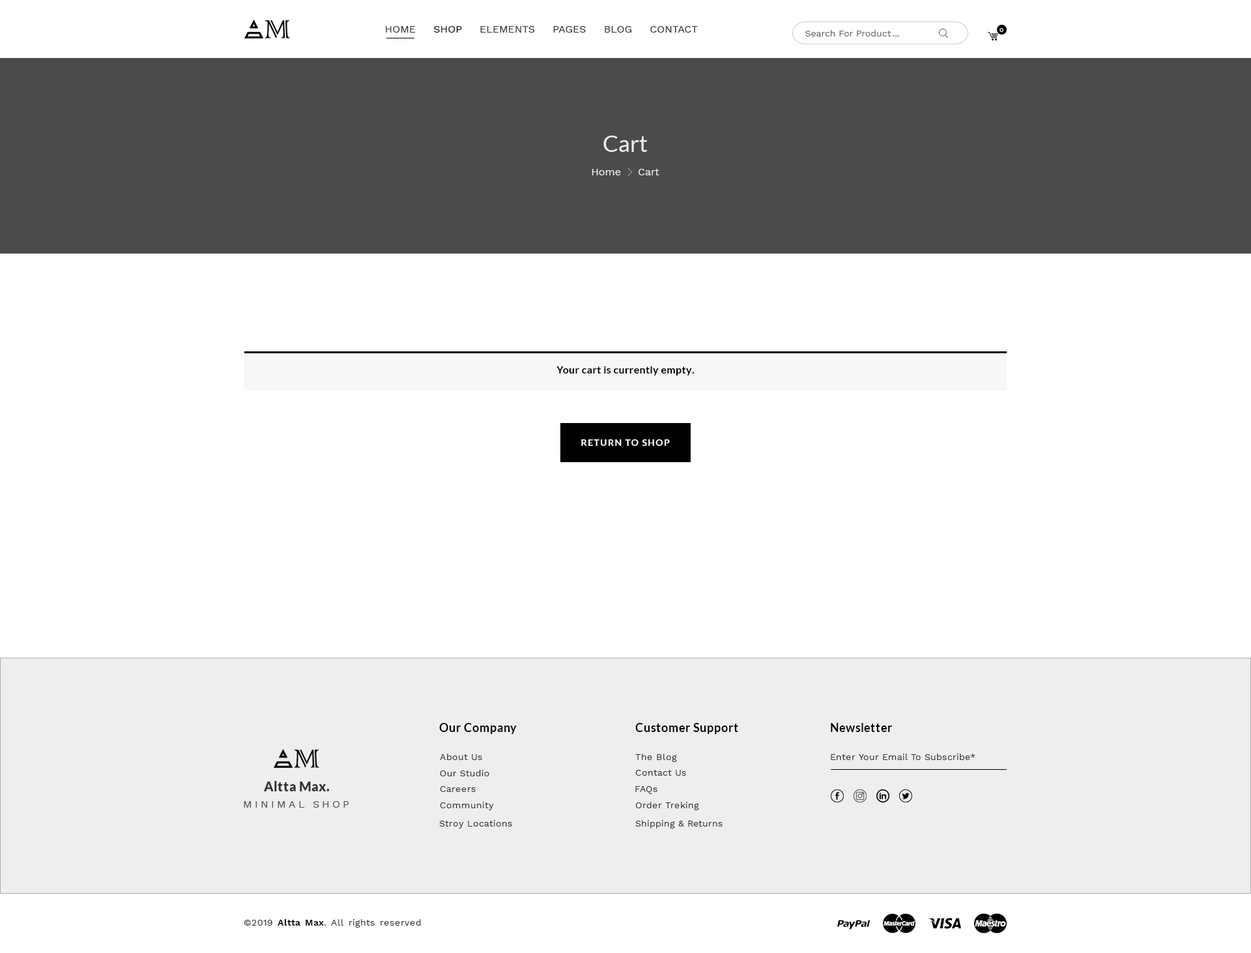
<style>
.page{position:relative;width:1251px;height:953px;background:#ffffff}
.page>*{position:absolute;margin:0}
.t1{font:10.4px "WorkSans-Regular";color:#333333}
.t2{font:10.4px "WorkSans-Regular";color:#000000}
.t3{font:9.1px "WorkSans-Regular";color:#666666}
.t4{font:6.5px "WorkSans-Regular";color:#ffffff}
.t5{font:22.8px "Lato-Regular";color:#eeeeee}
.t6{font:10.4px "WorkSans-Regular";color:#eeeeee}
.t7{font:10.4px "Lato-Bold";letter-spacing:0.02em;color:#000000}
.t8{font:10.4px "Lato-Bold";color:#000000}
.t9{font:9.1px "Lato-Bold";letter-spacing:0.1em;color:#ffffff}
.t10{font:11.7px "Lato-Bold";letter-spacing:0.03em;color:#000000}
.t11{font:9.1px "WorkSans-Regular";letter-spacing:0.03em;color:#333333}
.t12{font:13px "Lato-Black";letter-spacing:0.03em;color:#333333}
.t13{font:10.4px "WorkSans-Regular";letter-spacing:0.25em;color:#555555}
.t14{font:9.1px "WorkSans-SemiBold";letter-spacing:0.03em;color:#000000}
</style>
<div class="page">
<p class="t1" style="left:386px;top:26px;width:312px;height:7px">HOME     <span class="t2">SHOP</span>     ELEMENTS     PAGES     BLOG     CONTACT</p>
<p class="t3" style="left:806px;top:30px;width:86px;height:6px">Search For Product</p>
<p class="t4" style="left:1000px;top:28px;width:4px;height:4px">0</p>
<p class="t3" style="left:893px;top:35px;width:6px;height:1px">...</p>
<p class="t5" style="left:604px;top:136px;width:44px;height:16px">Cart</p>
<p class="t6" style="left:592px;top:169px;width:29px;height:6px">Home</p>
<p class="t6" style="left:639px;top:169px;width:21px;height:6px">Cart</p>
<p class="t7" style="left:557px;top:366px;width:135px;height:9px">Your cart is currently empty</p>
<p class="t8" style="left:692px;top:372px;width:2px;height:1px">.</p>
<p class="t9" style="left:581px;top:439px;width:89px;height:7px">RETURN TO SHOP</p>
<p class="t10" style="left:439px;top:723px;width:78px;height:11px">Our Company</p>
<p class="t10" style="left:635px;top:723px;width:103px;height:11px">Customer Support</p>
<p class="t10" style="left:831px;top:723px;width:61px;height:9px">Newsletter</p>
<p class="t11" style="left:440px;top:753px;width:42px;height:7px">About Us</p>
<p class="t11" style="left:635px;top:753px;width:42px;height:9px">The Blog</p>
<p class="t11" style="left:831px;top:753px;width:145px;height:7px">Enter Your Email To Subscribe*</p>
<p class="t11" style="left:440px;top:770px;width:49px;height:6px">Our Studio</p>
<p class="t11" style="left:635px;top:770px;width:51px;height:6px">Contact Us</p>
<p class="t12" style="left:264px;top:781px;width:66px;height:10px">Altta Max.</p>
<p class="t11" style="left:440px;top:786px;width:36px;height:6px">Careers</p>
<p class="t11" style="left:635px;top:786px;width:23px;height:8px">FAQs</p>
<p class="t13" style="left:244px;top:801px;width:105px;height:7px">MINIMAL SHOP</p>
<p class="t11" style="left:440px;top:802px;width:54px;height:8px">Community</p>
<p class="t11" style="left:635px;top:802px;width:64px;height:8px">Order Treking</p>
<p class="t11" style="left:439px;top:820px;width:73px;height:8px">Stroy Locations</p>
<p class="t11" style="left:635px;top:820px;width:88px;height:8px">Shipping &amp; Returns</p>
<p class="t11" style="left:244px;top:919px;width:177px;height:8px">©2019 <span class="t14">Altta Max</span>. All rights reserved</p>
</div>
